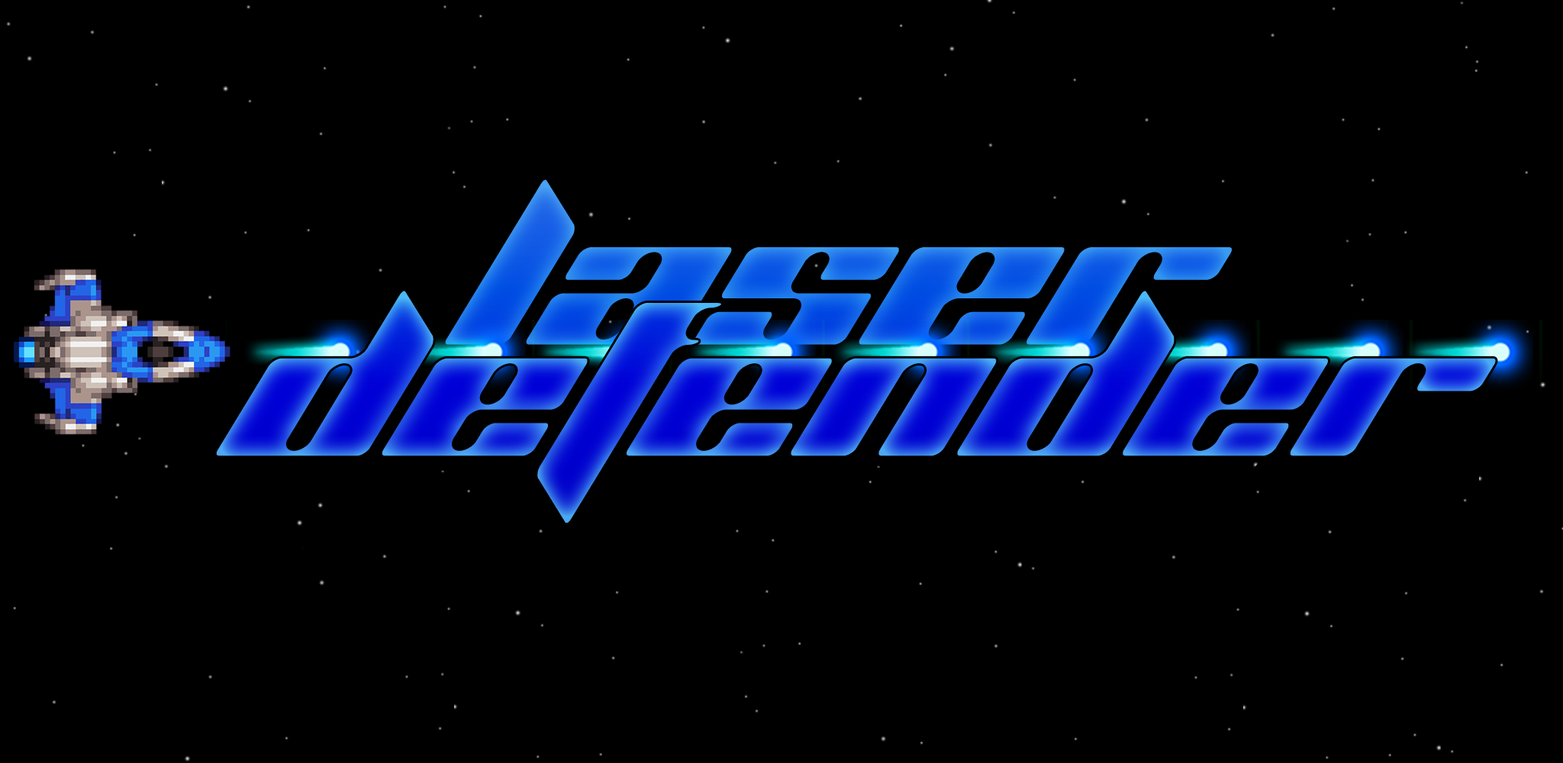
<style>
.page{position:relative;width:1563px;height:763px;background:#000000}
.page>*{position:absolute;margin:0}
.t1{font:192.6px/169.9px "PlanetKosmos";scale:1.05 1}
</style>
<div class="page">
<p class="t1" style="left:214px;top:118px;width:1284px;height:408px;text-align:center">Laser<br>Defender</p>
<p class="t1" style="left:195px;top:177px;width:1285px;height:407px;text-align:center">Laser<br>Defender</p>
</div>
